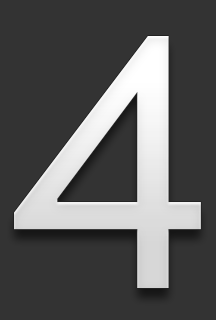
<style>
.page{position:relative;width:216px;height:320px;background:#333333}
.page>*{position:absolute;margin:0}
.t1{font:344.1px "Prelude-Medium";color:#e3e3e3}
</style>
<div class="page">
<p class="t1" style="left:14px;top:36px;width:187px;height:252px">4</p>
<p class="t1" style="left:14px;top:36px;width:187px;height:252px">4</p>
</div>
